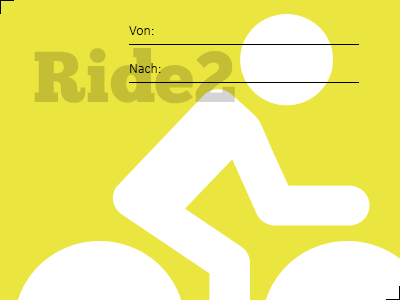
<style>
.page{position:relative;width:400px;height:300px;background:#ebe53f}
.page>*{position:absolute;margin:0}
.t1{font:14px "Calibri-Light";color:#000000}
.t2{font:72px "ChunkFive-Roman";color:#c3be33}
</style>
<div class="page">
<p class="t1" style="left:129px;top:26px;width:25px;height:9px">Von:</p>
<p class="t2" style="left:34px;top:48px;width:201px;height:56px">Ride2</p>
<p class="t1" style="left:130px;top:63px;width:31px;height:10px">Nach:</p>
</div>
